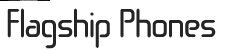
<style>
.page{position:relative;width:250px;height:50px;background:#ffffff}
.page>*{position:absolute;margin:0}
.t1{font:40px "SugarskinBTNBold";color:#242424}
</style>
<div class="page">
<p class="t1" style="left:7px;top:8px;width:209px;height:41px">Flagship Phones</p>
</div>
